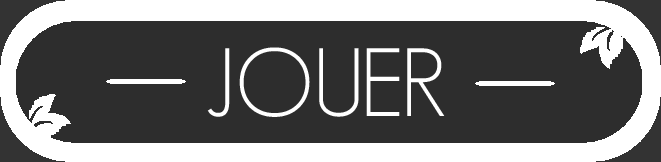
<style>
.page{position:relative;width:661px;height:162px;background:#2d2d2d}
.page>*{position:absolute;margin:0}
.t1{font:94.8px "GeosansLight";color:#ffffff}
</style>
<div class="page">
<p class="t1" style="left:207px;top:47px;width:238px;height:70px">JOUER</p>
</div>
